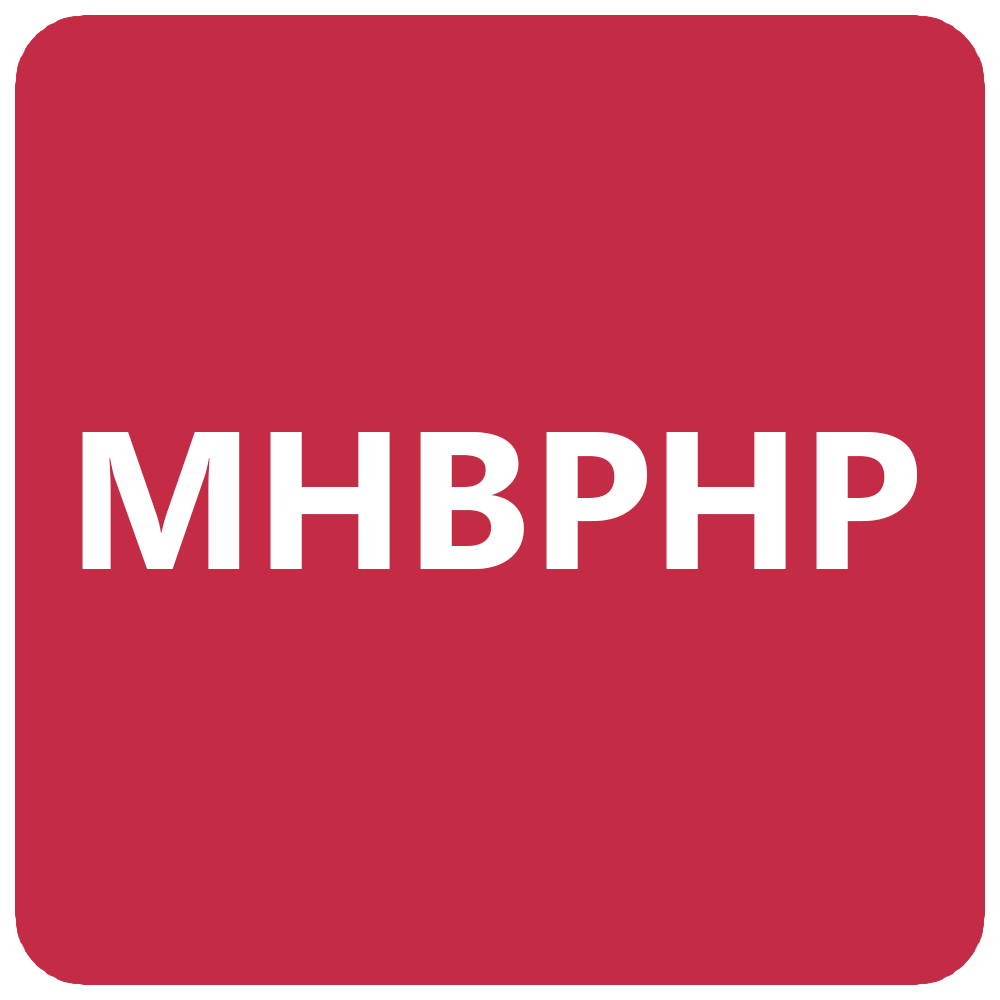
<style>
.page{position:relative;width:1000px;height:1000px;background:#c42b45}
.page>*{position:absolute;margin:0}
.t1{font:196px "Ebrima-Bold";color:#ffffff}
</style>
<div class="page">
<p class="t1" style="left:82px;top:432px;width:835px;height:137px">MHBPHP</p>
</div>
